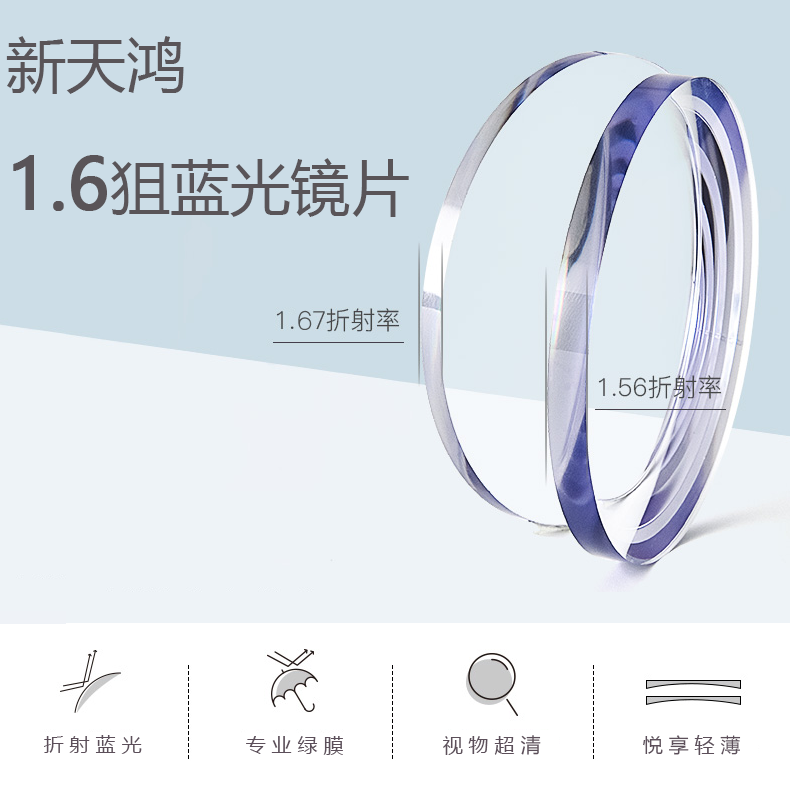
<style>
.page{position:relative;width:790px;height:786px;background:#ccdde7}
.page>*{position:absolute;margin:0}
.t1{font:60px/19px "MicrosoftYaHei";color:#595458}
.t2{font:70px/19px "MicrosoftYaHei";color:#595458;font-weight:bold}
.t3{font:24px "FZLTCXHJW--GB1-0";color:#505253;font-weight:bold}
.t4{font:20px "MicrosoftYaHei";color:#5c4f5a}
</style>
<div class="page">
<p class="t1" style="left:6px;top:36px;width:403px;height:181px">新天鸿<br><br><br><br><br><br><span class="t2">1.6</span>狙蓝光镜片</p>
<p class="t3" style="left:298px;top:310px;width:14px;height:20px">6</p>
<p class="t4" style="left:44px;top:735px;width:98px;height:19px">折 射 蓝 光</p>
<p class="t4" style="left:246px;top:736px;width:97px;height:19px">专 业 绿 膜</p>
<p class="t4" style="left:443px;top:735px;width:98px;height:20px">视 物 超 清</p>
<p class="t4" style="left:643px;top:735px;width:98px;height:20px">悦 享 轻 薄</p>
</div>
